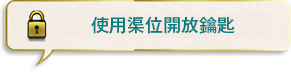
<style>
.page{position:relative;width:291px;height:72px}
.page>*{position:absolute;margin:0}
.t1{font:18px "GothicMB101Pr6N-Medium";color:#077c81}
</style>
<div class="page">
<p class="t1" style="left:91px;top:16px;width:144px;height:18px">使用渠位開放鑰匙</p>
</div>
